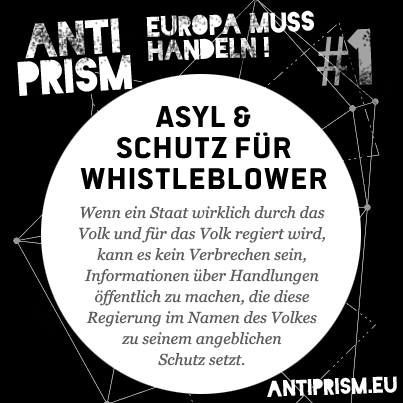
<style>
.page{position:relative;width:403px;height:403px;background:#000000}
.page>*{position:absolute;margin:0}
.t1{font:26.8px/23.9px "Blackout-Midnight";color:#ffffff}
.t2{font:45.7px/37.2px "Blackout-Midnight";color:#ffffff}
.t3{font:74.8px "MyriadPro-Regular"}
.t4{font:74.8px "Blackout-Midnight"}
.t5{font:33px/31px "PoliticsHead-Bold";color:#000000}
.t6{font:15.8px/21px "Georgia-Italic";color:#5c5c5c}
.t7{font:21.6px "Blackout-Midnight";color:#ffffff}
</style>
<div class="page">
<p class="t1" style="left:146px;top:10px;width:168px;height:51px;rotate:-2deg">EUROPA MUSS<br>HANDELN !</p>
<p class="t2" style="left:17px;top:18px;width:116px;height:78px;text-align:center;rotate:-4deg">ANTI<br>PRISM</p>
<p class="t3" style="left:317px;top:28px;width:55px;height:58px;rotate:-2deg">#<span class="t4">1</span></p>
<p class="t5" style="left:80px;top:106px;width:247px;height:84px;text-align:center">Asyl &amp;<br>Schutz für<br>Whistleblower</p>
<p class="t6" style="left:79px;top:206px;width:246px;height:160px;text-align:center">Wenn ein Staat wirklich durch das Volk und für das Volk regiert wird, kann es kein Verbrechen sein,<br>Informationen über Handlungen öffentlich zu machen, die diese<br>Regierung im Namen des Volkes<br>zu seinem angeblichen<br>Schutz setzt.</p>
<p class="t7" style="left:267px;top:376px;width:130px;height:21px;rotate:-2deg">antiprism.eu</p>
</div>
